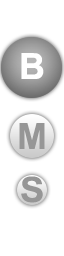
<style>
.page{position:relative;width:64px;height:256px;background:#ffffff}
.page>*{position:absolute;margin:0}
.t1{font:36px "Arial-BoldMT";color:#ffffff;text-transform:uppercase}
.t2{font:36px "Arial-BoldMT";color:#969696;text-transform:uppercase}
.t3{font:34.8px "Arial-BoldMT";color:#969696;text-transform:uppercase;scale:1.05 1}
</style>
<div class="page">
<p class="t1" style="left:21px;top:53px;width:23px;height:26px">B</p>
<p class="t2" style="left:19px;top:123px;width:26px;height:26px">M</p>
<p class="t3" style="left:21px;top:176px;width:22px;height:27px">S</p>
</div>
